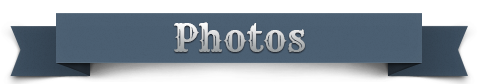
<style>
.page{position:relative;width:478px;height:84px;background:#ffffff}
.page>*{position:absolute;margin:0}
.t1{font:36px "Rye-Regular"}
</style>
<div class="page">
<p class="t1" style="left:174px;top:22px;width:131px;height:30px">Photos</p>
</div>
